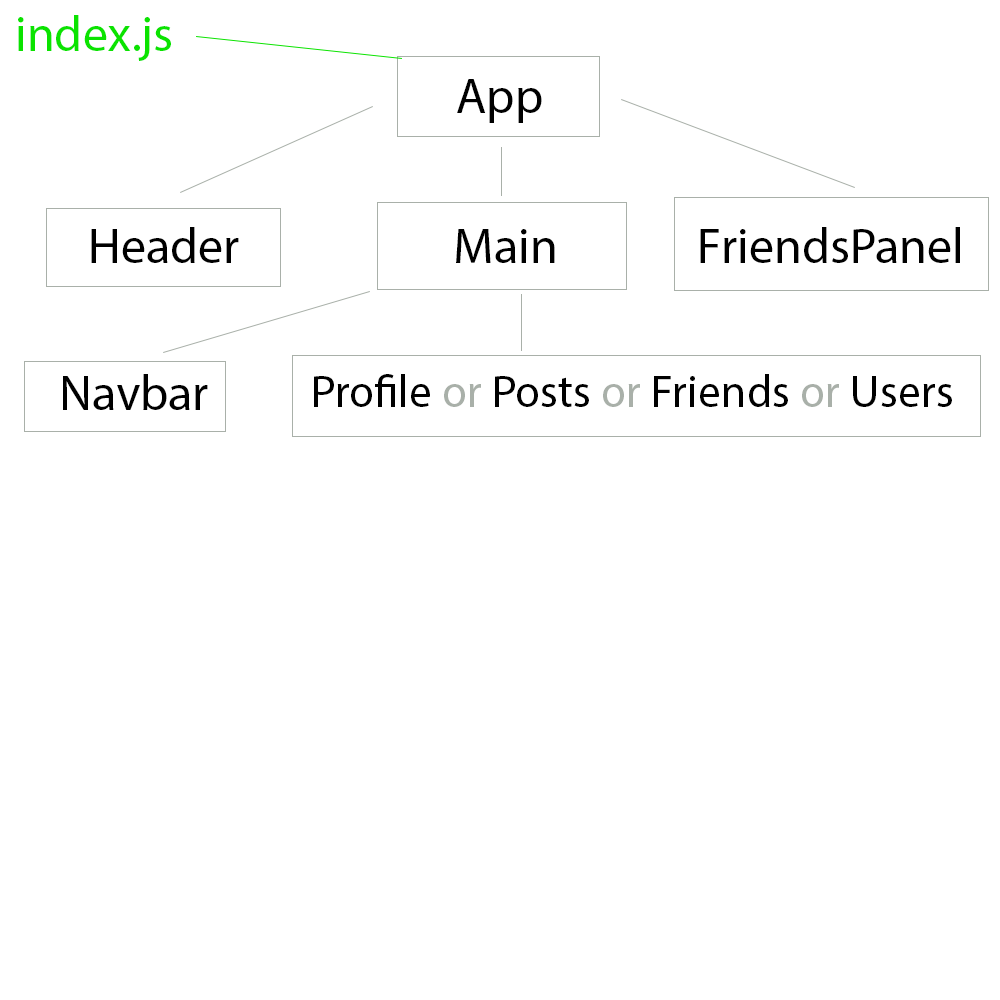
<style>
.page{position:relative;width:1000px;height:1000px;background:#ffffff}
.page>*{position:absolute;margin:0}
.t1{font:50px "MyriadPro-Regular";color:#0be300}
.t2{font:50px "MyriadPro-Regular";color:#000000}
.t3{font:45.8px "MyriadPro-Regular";color:#000000}
.t4{font:45.8px "MyriadPro-Regular";color:#a9b0a9}
</style>
<div class="page">
<p class="t1" style="left:18px;top:15px;width:153px;height:46px">index.js</p>
<p class="t2" style="left:457px;top:79px;width:85px;height:44px">App</p>
<p class="t2" style="left:91px;top:227px;width:148px;height:36px">Header</p>
<p class="t2" style="left:456px;top:229px;width:99px;height:34px">Main</p>
<p class="t2" style="left:700px;top:227px;width:260px;height:36px">FriendsPanel</p>
<p class="t2" style="left:63px;top:374px;width:145px;height:36px">Navbar</p>
<p class="t3" style="left:314px;top:374px;width:638px;height:33px">Profile <span class="t4">or </span>Posts <span class="t4">or</span> Friends <span class="t4">or</span> Users</p>
</div>
